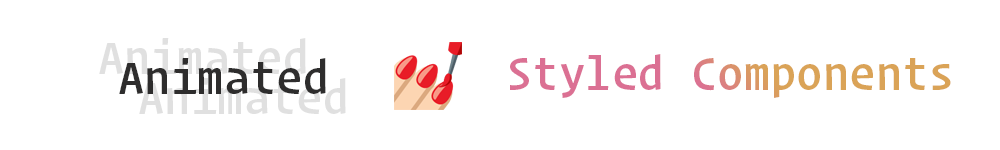
<style>
.page{position:relative;width:1000px;height:150px;background:#ffffff}
.page>*{position:absolute;margin:0}
.t1{font:48px "OperatorMono-Medium"}
.t2{font:48px "OperatorMono-Medium";color:#2e2d2d}
</style>
<div class="page">
<p class="t1" style="left:510px;top:54px;width:441px;height:44px">Styled Components</p>
<p class="t2" style="left:119px;top:58px;width:207px;height:36px">Animated</p>
</div>
